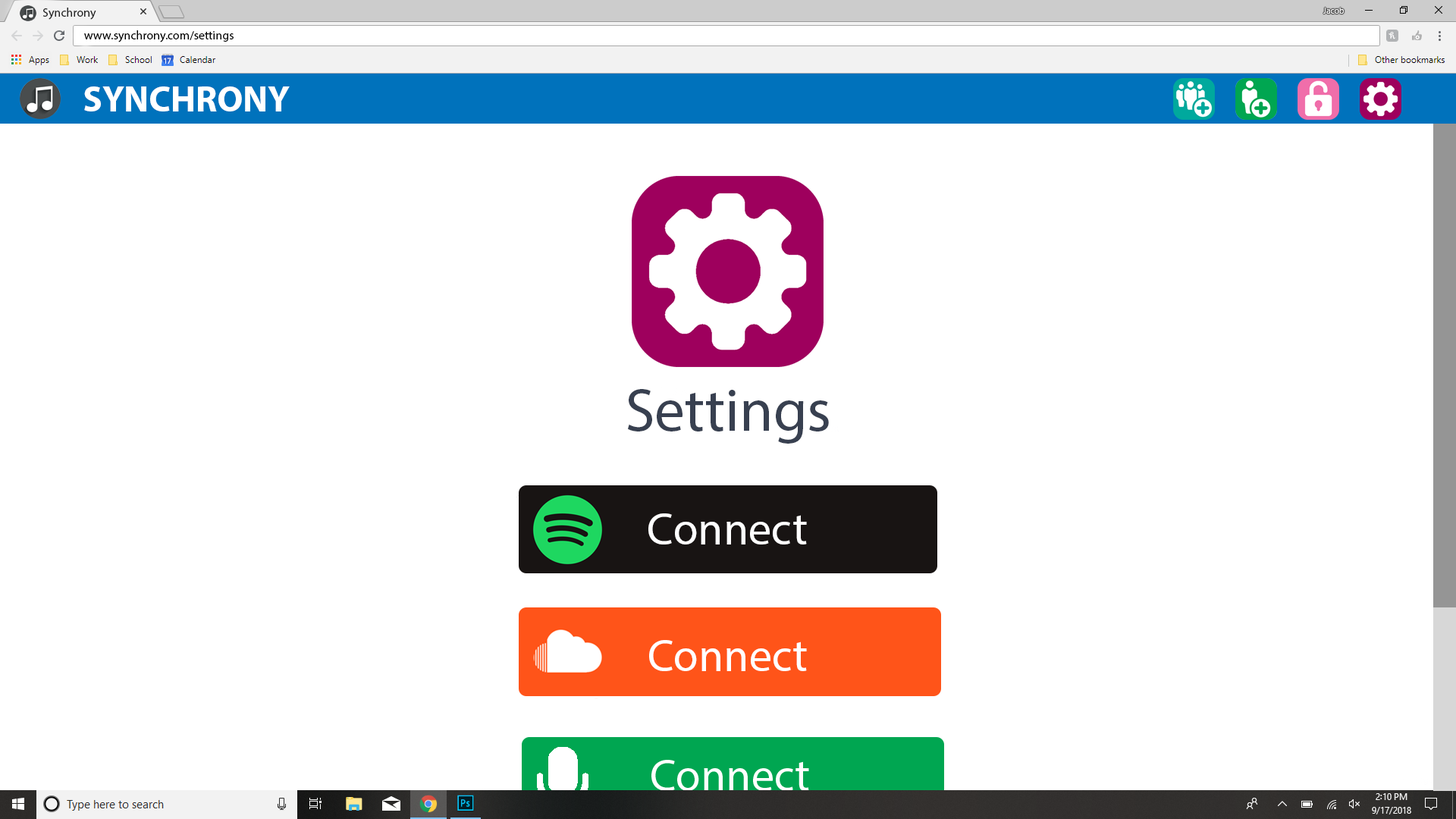
<style>
.page{position:relative;width:1456px;height:819px;background:#ffffff}
.page>*{position:absolute;margin:0}
.t1{font:12.1px "MyriadPro-Regular";color:#252525}
.t2{font:12.1px "MyriadPro-Regular";color:#000000}
.t3{font:36.4px "MyriadPro-Bold";color:#ffffff}
.t4{font:60.7px "MyriadPro-Regular";color:#384050}
.t5{font:45.5px "MyriadPro-Regular";color:#ffffff}
</style>
<div class="page">
<p class="t1" style="left:42px;top:8px;width:54px;height:12px">Synchrony</p>
<p class="t2" style="left:84px;top:30px;width:150px;height:12px">www.synchrony.com/settings</p>
<p class="t3" style="left:84px;top:86px;width:206px;height:25px">SYNCHRONY</p>
<p class="t4" style="left:628px;top:389px;width:201px;height:55px">Settings</p>
<p class="t5" style="left:648px;top:513px;width:159px;height:31px">Connect</p>
<p class="t5" style="left:649px;top:640px;width:158px;height:31px">Connect</p>
</div>
